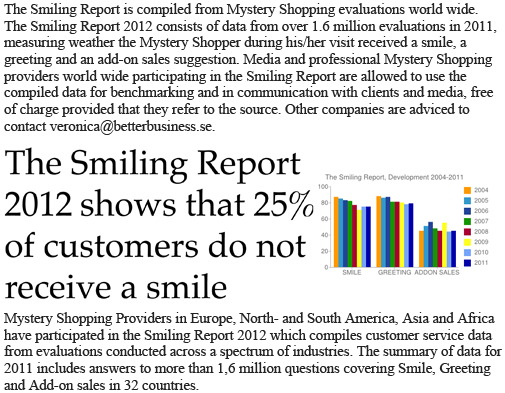
<style>
.page{position:relative;width:505px;height:393px;background:#ffffff}
.page>*{position:absolute;margin:0}
.t1{font:14.6px/16.7px "TimesNewRomanPSMT";color:#232222}
</style>
<div class="page">
<p class="t1" style="left:3px;top:3px;width:494px;height:132px">The Smiling Report is compiled from Mystery Shopping evaluations world wide.<br>The Smiling Report 2012 consists of data from over 1.6 million evaluations in 2011,<br>measuring weather the Mystery Shopper during his/her visit received a smile, a<br>greeting and an add-on sales suggestion. Media and professional Mystery Shopping<br>providers world wide participating in the Smiling Report are allowed to use the<br>compiled data for benchmarking and in communication with clients and media, free<br>of charge provided that they refer to the source. Other companies are adviced to<br>contact veronica@betterbusiness.se.</p>
<p class="t1" style="left:4px;top:312px;width:498px;height:78px">Mystery Shopping Providers in Europe, North- and South America, Asia and Africa<br>have participated in the Smiling Report 2012 which compiles customer service data<br>from evaluations conducted across a spectrum of industries. The summary of data for<br>2011 includes answers to more than 1,6 million questions covering Smile, Greeting<br>and Add-on sales in 32 countries.</p>
</div>
